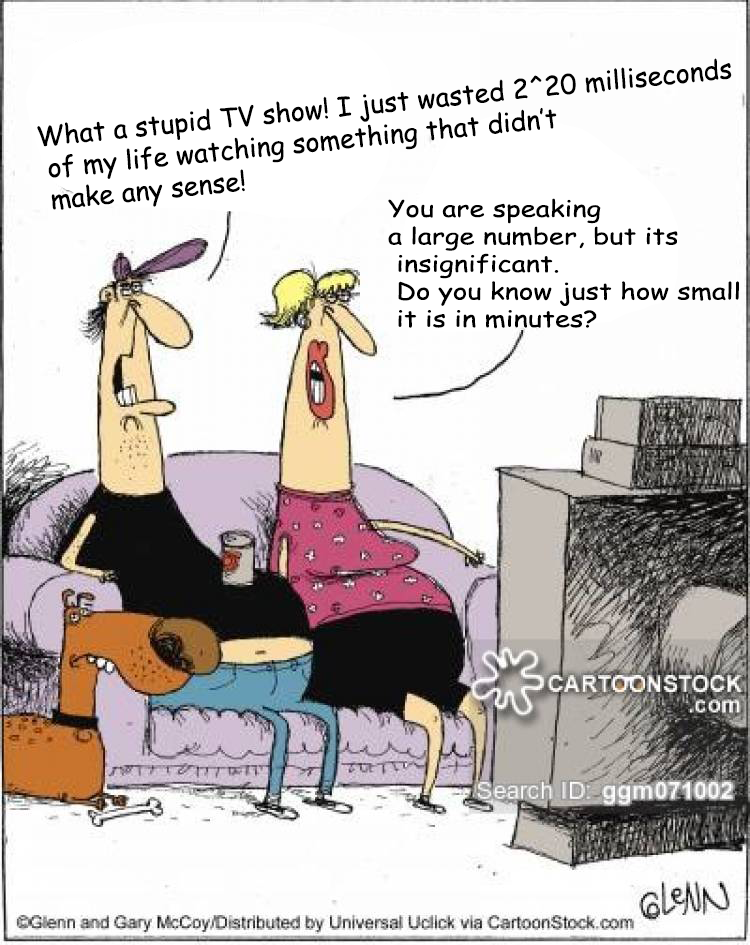
<style>
.page{position:relative;width:750px;height:945px}
.page>*{position:absolute;margin:0}
.t1{font:26.7px "ComicSansMS";color:#000000}
.t2{font:22.9px "ComicSansMS";color:#000000;scale:1.2 1}
</style>
<div class="page">
<p class="t1" style="left:37px;top:58px;width:695px;height:152px;rotate:-6deg">What a stupid TV show! I just wasted 2^20 milliseconds<br> of my life watching something that didn’t<br> make any sense!</p>
<p class="t2" style="left:388px;top:198px;width:351px;height:131px">You are speaking  <br>a large number, but its<br> insignificant.<br> Do you know just how small<br> it is in minutes?</p>
</div>
